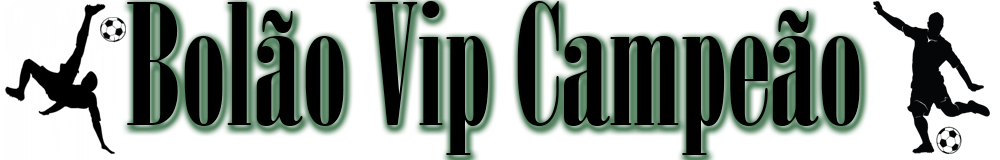
<style>
.page{position:relative;width:1000px;height:160px;background:#ffffff}
.page>*{position:absolute;margin:0}
.t1{font:166.7px "Onyx";color:#000000}
</style>
<div class="page">
<p class="t1" style="left:127px;top:1px;width:733px;height:154px">Bolão Vip Campeão</p>
</div>
